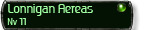
<style>
.page{position:relative;width:146px;height:30px;background:#031203}
.page>*{position:absolute;margin:0}
.t1{font:12px "Ageoneserif";color:#a3ffa3}
.t2{font:9px "Ageoneserif";color:#a3ffa3}
.t3{font:10px "Ageoneserif";color:#a3ffa3}
</style>
<div class="page">
<p class="t1" style="left:7px;top:4px;width:86px;height:21px">Lonnigan Aereas<br><span class="t2">Nv </span><span class="t3">11</span></p>
</div>
